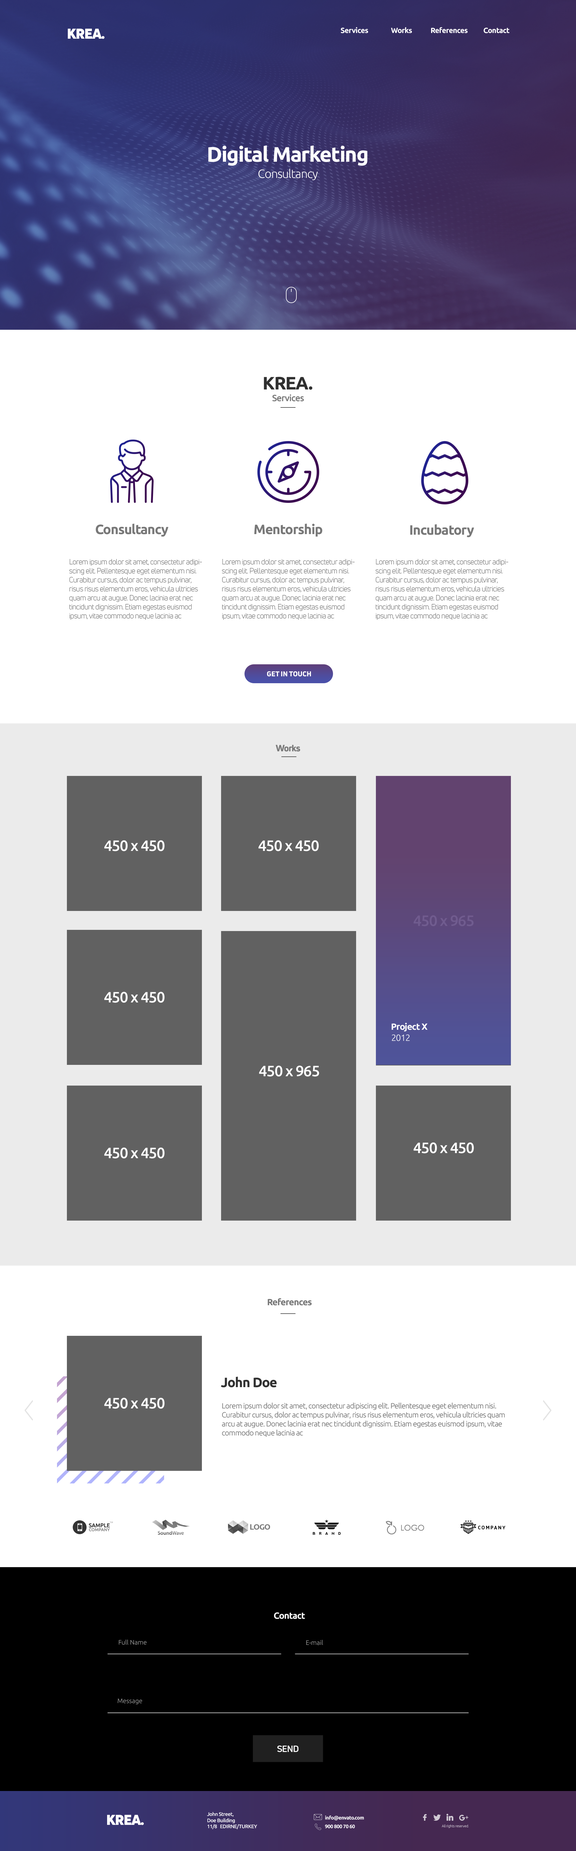
<style>
.page{position:relative;width:576px;height:1851px;background:#ffffff}
.page>*{position:absolute;margin:0}
.t1{font:14.1px "UniNeueBlack";letter-spacing:-0.04em;color:#ffffff}
.t2{font:7.5px "Ubuntu-Bold";letter-spacing:-0.04em;color:#ffffff}
.t3{font:21px "Ubuntu-Bold";letter-spacing:-0.04em;color:#ffffff}
.t4{font:12px "Ubuntu-Light";letter-spacing:-0.04em;color:#ffffff}
.t5{font:18px "Ubuntu-Bold";letter-spacing:-0.04em;color:#303030}
.t6{font:9px "Ubuntu-Medium";letter-spacing:-0.04em;color:#787878}
.t7{font:13.5px "Ubuntu-Bold";letter-spacing:-0.04em;color:#787878}
.t8{font:7.5px "UniNeueBook";letter-spacing:-0.04em;color:#5f5f5f}
.t9{font:6.9px "UniNeueHeavy";color:#ffffff}
.t10{font:9px "UniNeueHeavy";letter-spacing:-0.04em;color:#787878}
.t11{font:15px "Ubuntu-Medium";letter-spacing:-0.04em;color:#ffffff}
.t12{font:15px "Ubuntu-Medium";letter-spacing:-0.04em;color:#705b8f}
.t13{font:9px "Ubuntu-Bold";letter-spacing:-0.04em;color:#ffffff}
.t14{font:9px "Ubuntu-Light";letter-spacing:-0.04em;color:#ffffff}
.t15{font:9px "Ubuntu-Bold";letter-spacing:-0.04em;color:#787878}
.t16{font:13.5px "Ubuntu-Bold";letter-spacing:-0.04em;color:#303030}
.t17{font:7.5px "Ubuntu-Light";letter-spacing:-0.04em;color:#5f5f5f}
.t18{font:6.4px "Ubuntu-Light";color:#b2b2b2}
.t19{font:6.5px "Ubuntu-Light";color:#b2b2b2}
.t20{font:8.9px "UniNeueBold";letter-spacing:-0.04em;color:#ffffff}
.t21{font:5.1px "Ubuntu-Medium";letter-spacing:-0.04em;color:#ffffff}
.t22{font:5.1px "Ubuntu-Bold";letter-spacing:-0.04em;color:#ffffff}
.t23{font:3.6px "Ubuntu-Light";letter-spacing:-0.04em}
</style>
<div class="page">
<p class="t1" style="left:68px;top:29px;width:37px;height:10px">KREA.</p>
<p class="t2" style="left:341px;top:27px;width:27px;height:6px">Services</p>
<p class="t2" style="left:391px;top:27px;width:21px;height:6px">Works</p>
<p class="t2" style="left:431px;top:27px;width:37px;height:6px">References</p>
<p class="t2" style="left:484px;top:28px;width:25px;height:5px">Contact</p>
<p class="t3" style="left:208px;top:145px;width:160px;height:21px">Digital Marketing</p>
<p class="t4" style="left:258px;top:169px;width:60px;height:11px">Consultancy</p>
<p class="t5" style="left:264px;top:377px;width:48px;height:13px">KREA.</p>
<p class="t6" style="left:272px;top:394px;width:32px;height:7px">Services</p>
<p class="t7" style="left:96px;top:524px;width:73px;height:13px">Consultancy</p>
<p class="t7" style="left:254px;top:524px;width:69px;height:13px">Mentorship</p>
<p class="t7" style="left:410px;top:524px;width:64px;height:13px">Incubatory</p>
<p class="t8" style="left:69px;top:559px;width:133px;height:61px">Lorem ipsum dolor sit amet, consectetur adipiscing elit. Pellentesque eget elementum nisi. Curabitur cursus, dolor ac tempus pulvinar, risus risus elementum eros, vehicula ultricies quam arcu at augue. Donec lacinia erat nec tincidunt dignissim. Etiam egestas euismod ipsum, vitae commodo neque lacinia ac</p>
<p class="t8" style="left:222px;top:559px;width:133px;height:61px">Lorem ipsum dolor sit amet, consectetur adipiscing elit. Pellentesque eget elementum nisi. Curabitur cursus, dolor ac tempus pulvinar, risus risus elementum eros, vehicula ultricies quam arcu at augue. Donec lacinia erat nec tincidunt dignissim. Etiam egestas euismod ipsum, vitae commodo neque lacinia ac</p>
<p class="t8" style="left:376px;top:559px;width:132px;height:61px">Lorem ipsum dolor sit amet, consectetur adipiscing elit. Pellentesque eget elementum nisi. Curabitur cursus, dolor ac tempus pulvinar, risus risus elementum eros, vehicula ultricies quam arcu at augue. Donec lacinia erat nec tincidunt dignissim. Etiam egestas euismod ipsum, vitae commodo neque lacinia ac</p>
<p class="t9" style="left:267px;top:671px;width:44px;height:6px">GET IN TOUCH</p>
<p class="t10" style="left:276px;top:745px;width:24px;height:7px">Works</p>
<p class="t11" style="left:104px;top:840px;width:61px;height:11px">450 x 450</p>
<p class="t11" style="left:258px;top:840px;width:61px;height:11px">450 x 450</p>
<p class="t12" style="left:413px;top:915px;width:61px;height:11px">450 x 965</p>
<p class="t11" style="left:104px;top:992px;width:61px;height:11px">450 x 450</p>
<p class="t13" style="left:392px;top:1022px;width:36px;height:9px">Project X</p>
<p class="t14" style="left:392px;top:1034px;width:18px;height:7px">2012</p>
<p class="t11" style="left:259px;top:1065px;width:60px;height:11px">450 x 965</p>
<p class="t11" style="left:413px;top:1142px;width:61px;height:11px">450 x 450</p>
<p class="t11" style="left:104px;top:1147px;width:61px;height:11px">450 x 450</p>
<p class="t15" style="left:268px;top:1298px;width:44px;height:7px">References</p>
<p class="t16" style="left:221px;top:1376px;width:56px;height:11px">John Doe</p>
<p class="t11" style="left:104px;top:1397px;width:61px;height:12px">450 x 450</p>
<p class="t17" style="left:222px;top:1402px;width:283px;height:35px">Lorem ipsum dolor sit amet, consectetur adipiscing elit. Pellentesque eget elementum nisi. Curabitur cursus, dolor ac tempus pulvinar, risus risus elementum eros, vehicula ultricies quam arcu at augue. Donec lacinia erat nec tincidunt dignissim. Etiam egestas euismod ipsum, vitae commodo neque lacinia ac</p>
<p class="t13" style="left:274px;top:1612px;width:31px;height:7px">Contact</p>
<p class="t18" style="left:119px;top:1639px;width:28px;height:6px">Full Name</p>
<p class="t19" style="left:306px;top:1640px;width:17px;height:5px">E-mail</p>
<p class="t19" style="left:118px;top:1698px;width:24px;height:6px">Message</p>
<p class="t20" style="left:277px;top:1745px;width:22px;height:7px">SEND</p>
<p class="t1" style="left:107px;top:1814px;width:37px;height:11px">KREA.</p>
<p class="t21" style="left:207px;top:1811px;width:50px;height:18px">John Street,<br>Doe Building<br>11/8   EDIRNE/TURKEY</p>
<p class="t22" style="left:325px;top:1815px;width:39px;height:5px">info@envato.com</p>
<p class="t22" style="left:325px;top:1824px;width:30px;height:4px">900 800 70 60</p>
<p class="t23" style="left:442px;top:1824px;width:27px;height:4px">All rights reserved.</p>
</div>
